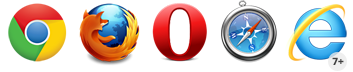
<style>
.page{position:relative;width:353px;height:72px;background:#ffffff}
.page>*{position:absolute;margin:0}
.t1{font:10px "OpenSans-Bold";color:#414141}
</style>
<div class="page">
<p class="t1" style="left:332px;top:57px;width:12px;height:8px">7+</p>
</div>
